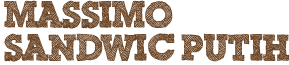
<style>
.page{position:relative;width:289px;height:65px;background:#ffffff}
.page>*{position:absolute;margin:0}
.t1{font:36px/33px "ScribbleBoxDEMO";color:#684121}
</style>
<div class="page">
<p class="t1" style="left:4px;top:0px;width:285px;height:62px">Massimo <br>Sandwic Putih</p>
</div>
